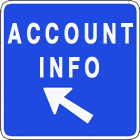
<style>
.page{position:relative;width:140px;height:140px;background:#1e4ae1}
.page>*{position:absolute;margin:0}
.t1{font:27.6px "Helvetica-Bold";letter-spacing:0.2em;color:#f8f9fb;font-weight:bold;scale:0.71 1}
</style>
<div class="page">
<p class="t1" style="left:7px;top:22px;width:126px;height:22px">ACCOUNT</p>
<p class="t1" style="left:40px;top:56px;width:59px;height:22px">INFO</p>
</div>
